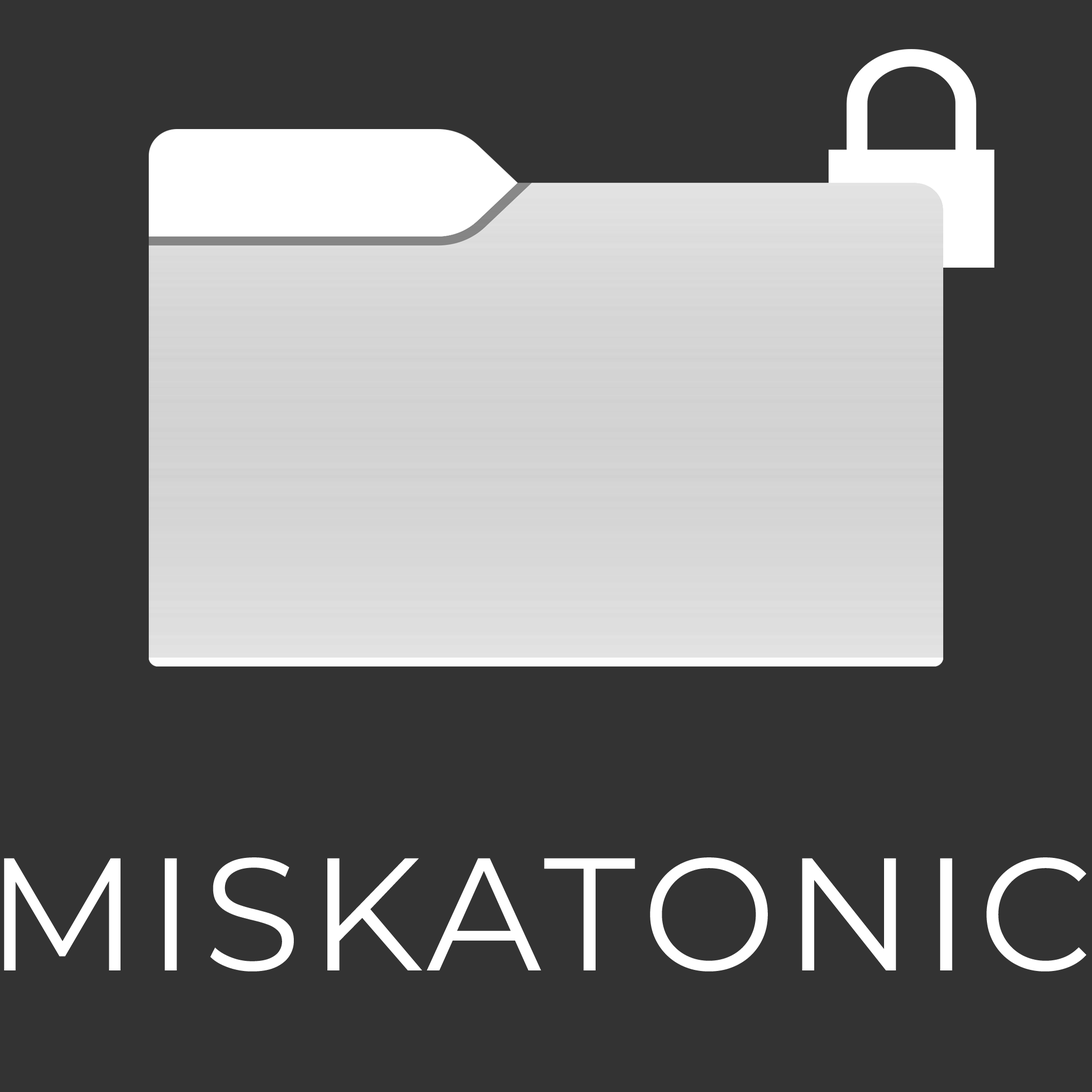
<style>
.page{position:relative;width:1092px;height:1092px;background:#333333}
.page>*{position:absolute;margin:0}
.t1{font:159.9px "MontserratThin-Regular";letter-spacing:0.05em;color:#ffffff}
</style>
<div class="page">
<p class="t1" style="left:4px;top:857px;width:1083px;height:114px">MISKATONIC</p>
</div>
